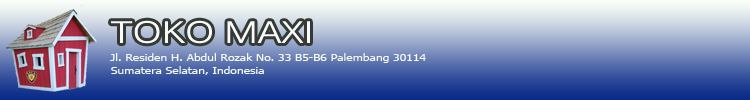
<style>
.page{position:relative;width:750px;height:100px}
.page>*{position:absolute;margin:0}
.t1{font:30.3px "Kalinga";color:#f9f9fb;scale:1.21 1}
.t2{font:10px "Tahoma";color:#f6fbf6;scale:1.21 1}
</style>
<div class="page">
<p class="t1" style="left:111px;top:20px;width:199px;height:24px">TOKO MAXI</p>
<p class="t2" style="left:110px;top:53px;width:316px;height:10px">Jl. Residen H. Abdul Rozak No. 33 B5-B6 Palembang 30114</p>
<p class="t2" style="left:111px;top:66px;width:153px;height:9px">Sumatera Selatan, Indonesia</p>
</div>
